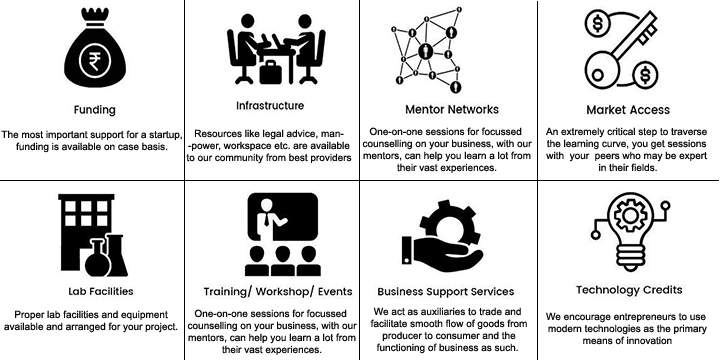
<style>
.page{position:relative;width:720px;height:360px;background:#ffffff}
.page>*{position:absolute;margin:0}
.t1{font:10px "ArialMT";color:#0c0c0c}
</style>
<div class="page">
<p class="t1" style="left:1px;top:130px;width:181px;height:23px;text-align:center">The most important support for a startup,<br>funding is available on case basis.</p>
<p class="t1" style="left:186px;top:129px;width:166px;height:35px;text-align:center">Resources like legal advice, man-<br>-power, workspace etc. are available<br>to our community from best providers</p>
<p class="t1" style="left:362px;top:127px;width:170px;height:46px;text-align:center">One-on-one sessions for focussed <br>counselling on your business, with our<br>mentors, can help you learn a lot from<br>their vast experiences.</p>
<p class="t1" style="left:546px;top:127px;width:161px;height:45px;text-align:center">An extremely critical step to traverse <br>the learning curve, you get sessions <br>with  your  peers who may be expert <br>in their fields.</p>
<p class="t1" style="left:4px;top:310px;width:174px;height:23px;text-align:center">Proper lab facilities and equipment<br>available and arranged for your project.</p>
<p class="t1" style="left:187px;top:309px;width:170px;height:46px;text-align:center">One-on-one sessions for focussed <br>counselling on your business, with our<br>mentors, can help you learn a lot from<br>their vast experiences.</p>
<p class="t1" style="left:370px;top:307px;width:157px;height:47px;text-align:center">We act as auxiliaries to trade and <br>facilitate smooth flow of goods from<br> producer to consumer and the <br>functioning of business as such.</p>
<p class="t1" style="left:546px;top:312px;width:161px;height:33px;text-align:center">We encourage entrepreneurs to use<br> modern technologies as the primary<br> means of innovation</p>
</div>
